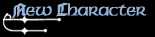
<style>
.page{position:relative;width:155px;height:37px;background:#000000}
.page>*{position:absolute;margin:0}
.t1{font:18px "Celtic-CondensedNormal";color:#94b2da}
.t2{font:18px "CathedralExtendedNormal";color:#94b2da}
</style>
<div class="page">
<p class="t1" style="left:11px;top:2px;width:136px;height:17px"><span class="t2">N</span>ew <span class="t2">C</span>haracter</p>
</div>
